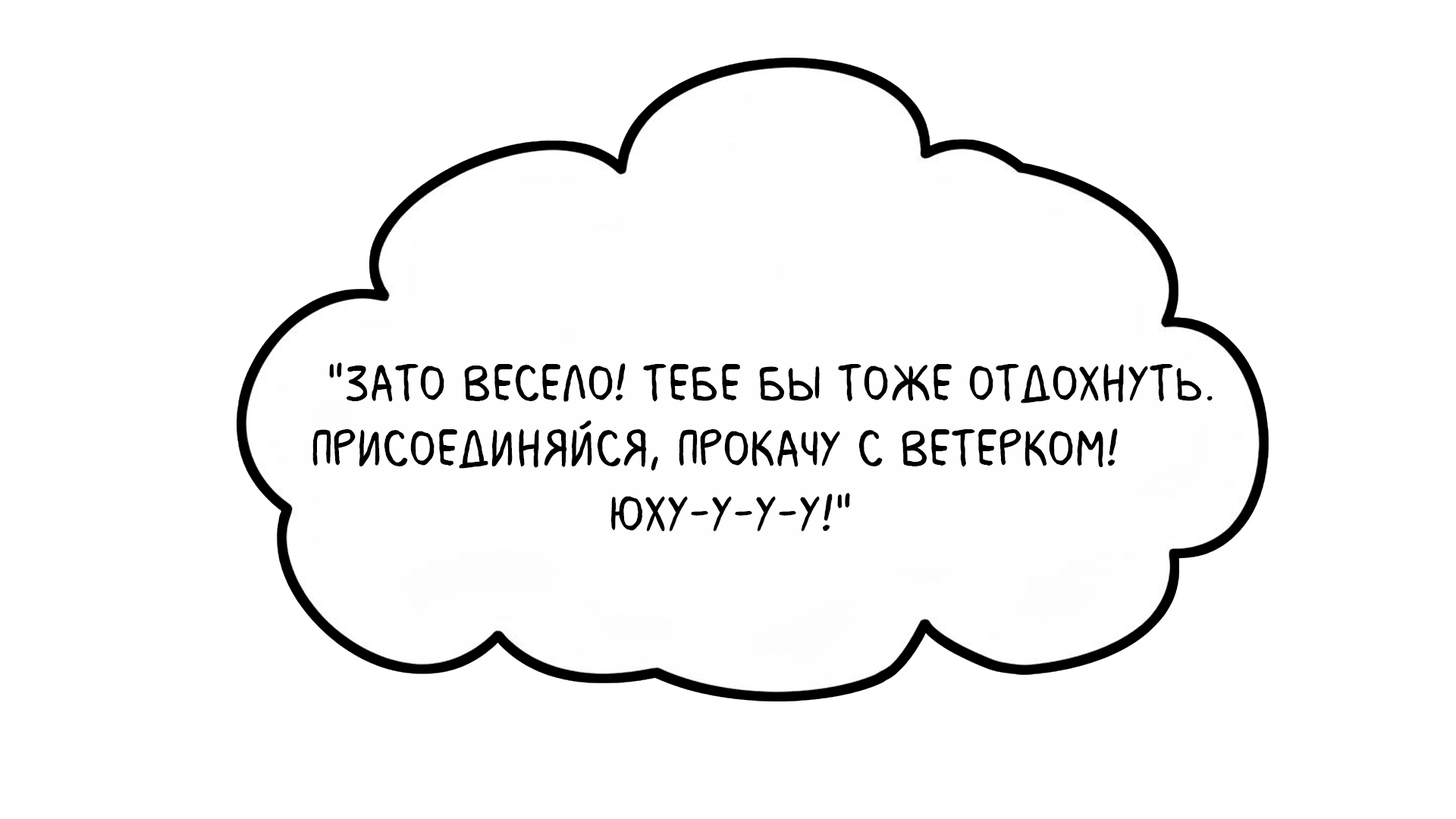
<style>
.page{position:relative;width:1456px;height:819px;background:#ffffff}
.page>*{position:absolute;margin:0}
.t1{font:54.6px "MilkMustacheBB";color:#000000}
</style>
<div class="page">
<p class="t1" style="left:312px;top:362px;width:901px;height:170px">"Зато весело! Тебе бы тоже отдохнуть. <br>Присоединяйся, прокачу с ветерком! <br>           Юху-у-у-у!"</p>
</div>
